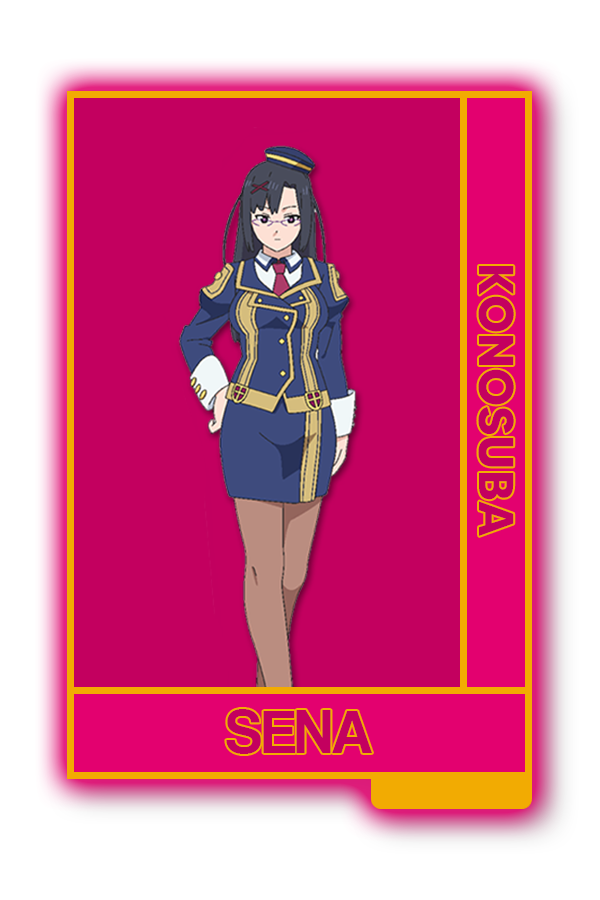
<style>
.page{position:relative;width:600px;height:900px;background:#c3005f}
.page>*{position:absolute;margin:0}
.t1{font:48.8px "MADETOMMY-Bold";color:#c3005f}
.t2{font:62.7px "CoolveticaRg-Regular";color:#c3005f}
</style>
<div class="page">
<p class="t1" style="left:478px;top:266px;width:36px;height:270px;rotate:90deg">KONOSUBA</p>
<p class="t2" style="left:226px;top:709px;width:146px;height:45px">SENA</p>
</div>
